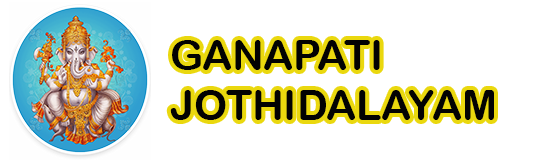
<style>
.page{position:relative;width:539px;height:160px;background:#ffffff}
.page>*{position:absolute;margin:0}
.t1{font:41.8px "ArialRoundedMTBold";color:#020202}
</style>
<div class="page">
<p class="t1" style="left:170px;top:40px;width:324px;height:80px">GANAPATI<br>JOTHIDALAYAM</p>
</div>
